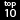
<style>
.page{position:relative;width:20px;height:20px;background:#000000}
.page>*{position:absolute;margin:0}
.t1{font:8px "MyriadPro-Regular";color:#ffffff}
.t2{font:12px "MyriadPro-Regular";color:#ffffff}
</style>
<div class="page">
<p class="t1" style="left:4px;top:1px;width:12px;height:7px">top</p>
<p class="t2" style="left:5px;top:9px;width:11px;height:8px">10</p>
</div>
